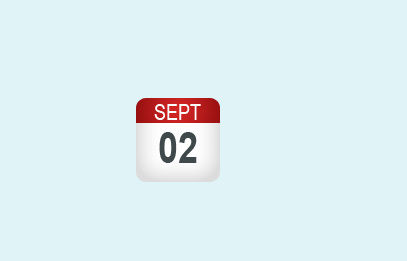
<style>
.page{position:relative;width:407px;height:261px;background:#e0f3f7}
.page>*{position:absolute;margin:0}
.t1{font:21.6px "ArialMT";color:#ffffff;scale:0.83 1}
.t2{font:43.2px "Arial-BoldMT";color:#3f494b;scale:0.83 1}
</style>
<div class="page">
<p class="t1" style="left:154px;top:104px;width:47px;height:16px">SEPT</p>
<p class="t2" style="left:159px;top:132px;width:38px;height:31px">02</p>
</div>
